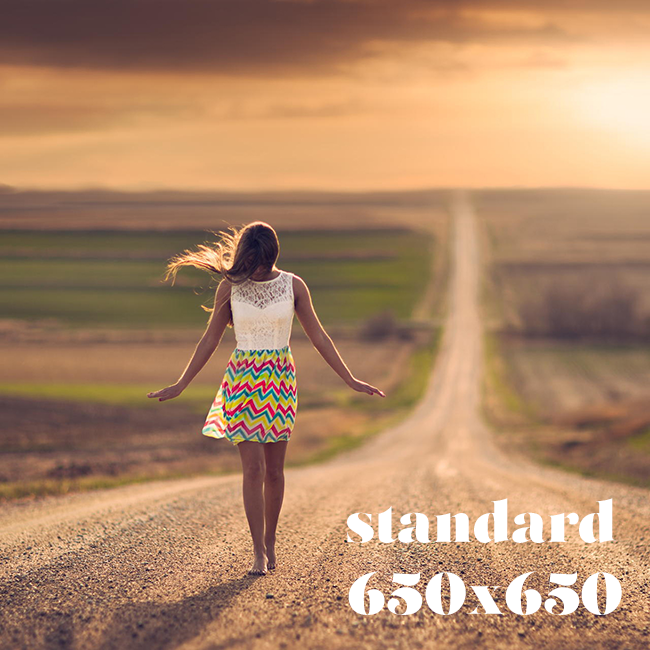
<style>
.page{position:relative;width:650px;height:650px}
.page>*{position:absolute;margin:0}
.t1{font:58.3px "Salome-Fine";color:#ffffff}
</style>
<div class="page">
<p class="t1" style="left:347px;top:498px;width:269px;height:45px">standard</p>
<p class="t1" style="left:348px;top:571px;width:274px;height:44px">650x650</p>
</div>
